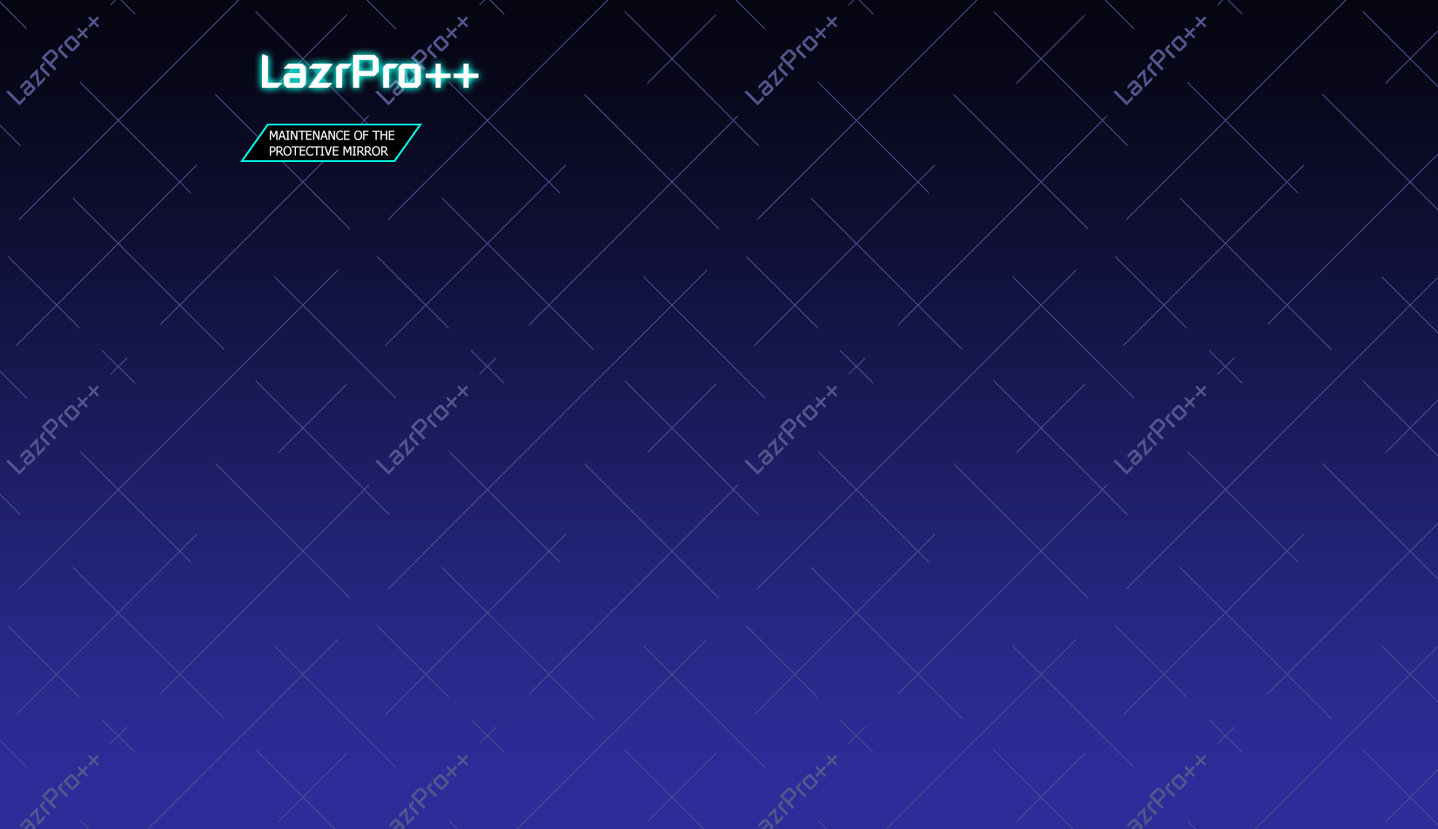
<style>
.page{position:relative;width:1438px;height:829px}
.page>*{position:absolute;margin:0}
.t1{font:45.3px "RussellSquare";color:#ffffff;font-weight:bold}
.t2{font:12.2px/15.7px "Tahoma";color:#ffffff}
</style>
<div class="page">
<p class="t1" style="left:262px;top:54px;width:217px;height:34px">LazrPro++</p>
<p class="t2" style="left:270px;top:131px;width:124px;height:25px">MAINTENANCE OF THE<br>PROTECTIVE MIRROR</p>
</div>
